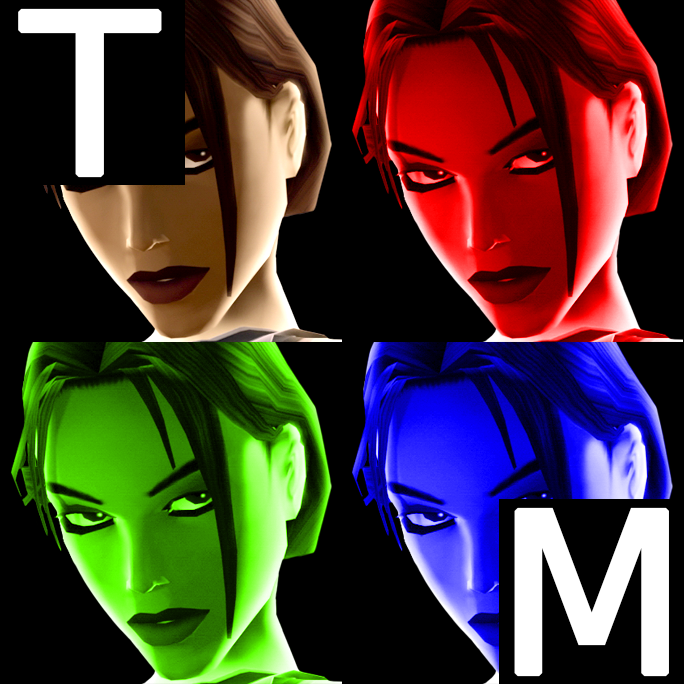
<style>
.page{position:relative;width:684px;height:684px;background:#000000}
.page>*{position:absolute;margin:0}
.t1{font:222.1px "BitstreamVeraSans-Roman";color:#ffffff;font-weight:bold}
</style>
<div class="page">
<p class="t1" style="left:18px;top:8px;width:144px;height:170px">T</p>
<p class="t1" style="left:514px;top:507px;width:155px;height:170px">M</p>
</div>
